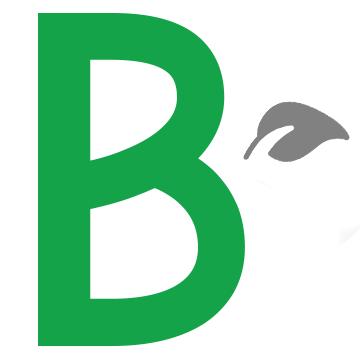
<style>
.page{position:relative;width:360px;height:360px;background:#ffffff}
.page>*{position:absolute;margin:0}
.t1{font:449.4px "ADAM.CGPRO";color:#15a34a}
</style>
<div class="page">
<p class="t1" style="left:38px;top:13px;width:207px;height:334px">B</p>
</div>
